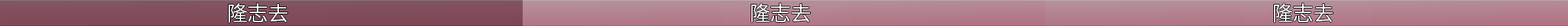
<style>
.page{position:relative;width:1568px;height:26px}
.page>*{position:absolute;margin:0}
.t1{font:20.6px "SourceHanSansSC-Normal";color:#ffffff}
</style>
<div class="page">
<p class="t1" style="left:229px;top:3px;width:58px;height:20px">隆志去</p>
<p class="t1" style="left:751px;top:3px;width:59px;height:20px">隆志去</p>
<p class="t1" style="left:1274px;top:3px;width:59px;height:20px">隆志去</p>
</div>
